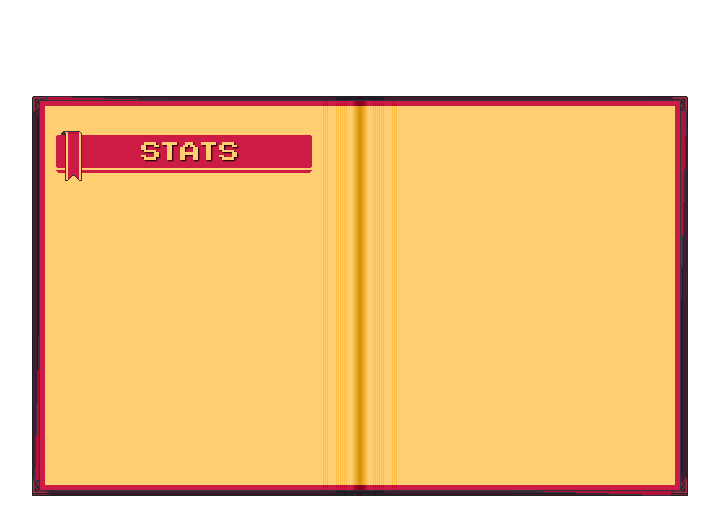
<style>
.page{position:relative;width:704px;height:512px;background:#ffce70}
.page>*{position:absolute;margin:0}
.t1{font:18px "A-Goblin-Appears!";color:#ffce70}
</style>
<div class="page">
<p class="t1" style="left:141px;top:142px;width:96px;height:18px">STATS</p>
</div>
